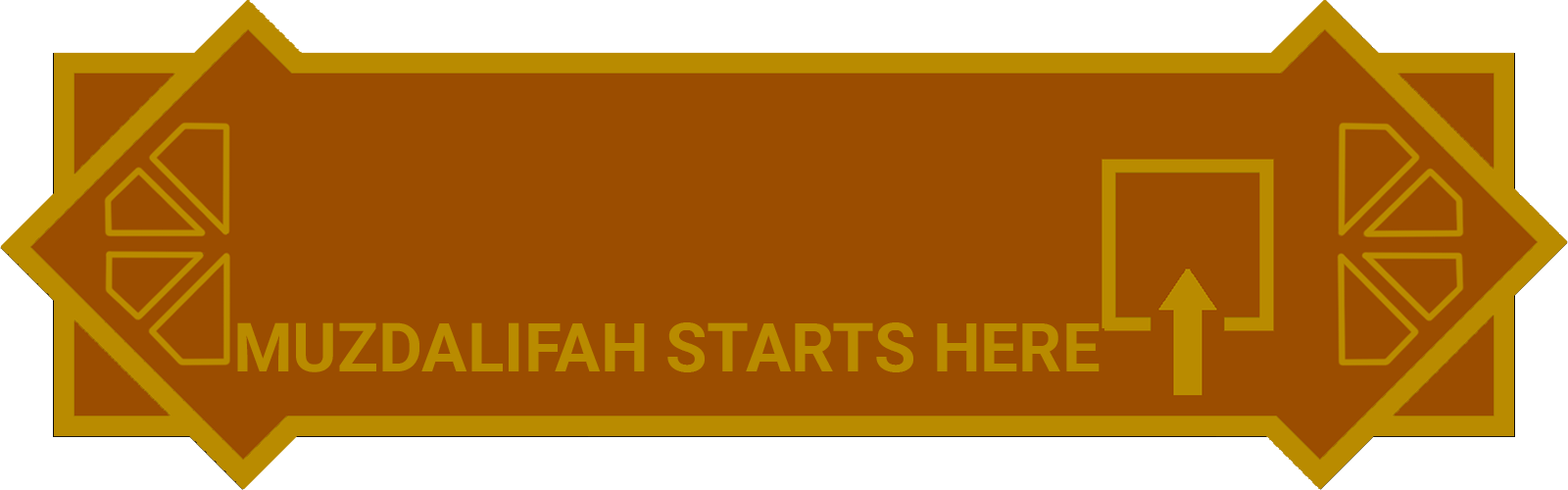
<style>
.page{position:relative;width:1568px;height:490px;background:#9b4d00}
.page>*{position:absolute;margin:0}
.t1{font:67.8px "Roboto-Bold";color:#b98b00}
</style>
<div class="page">
<p class="t1" style="left:237px;top:322px;width:863px;height:50px">MUZDALIFAH STARTS HERE</p>
</div>
